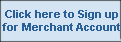
<style>
.page{position:relative;width:121px;height:42px;background:#d5e4f2}
.page>*{position:absolute;margin:0}
.t1{font:11px "Arial-BoldMT";color:#296098}
</style>
<div class="page">
<p class="t1" style="left:2px;top:10px;width:118px;height:21px;text-align:center">Click here to Sign up<br>for Merchant Account</p>
</div>
